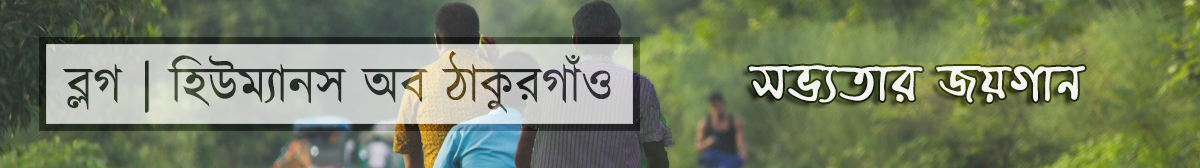
<style>
.page{position:relative;width:1200px;height:168px}
.page>*{position:absolute;margin:0}
.t1{font:51.7px "Kalpurush";color:#2b3228}
.t2{font:66.7px "EkusheyPuja";color:#fefcfc}
</style>
<div class="page">
<p class="t1" style="left:63px;top:51px;width:548px;height:63px">ব্লগ | হিউম্যানস অব ঠাকুরগাঁও</p>
<p class="t2" style="left:749px;top:65px;width:336px;height:38px">সভ্যতার জয়গান</p>
</div>
